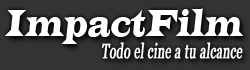
<style>
.page{position:relative;width:250px;height:70px;background:#333333}
.page>*{position:absolute;margin:0}
.t1{font:39.1px "LatinWide";letter-spacing:0.01em;color:#ffffff;font-style:italic;scale:0.59 1}
.t2{font:20.4px "Vani";letter-spacing:0.01em;color:#ffffff;font-weight:bold;font-style:italic;scale:0.59 1}
</style>
<div class="page">
<p class="t1" style="left:5px;top:8px;width:239px;height:36px">ImpactFilm</p>
<p class="t2" style="left:102px;top:42px;width:141px;height:17px">Todo el cine a tu alcance</p>
</div>
